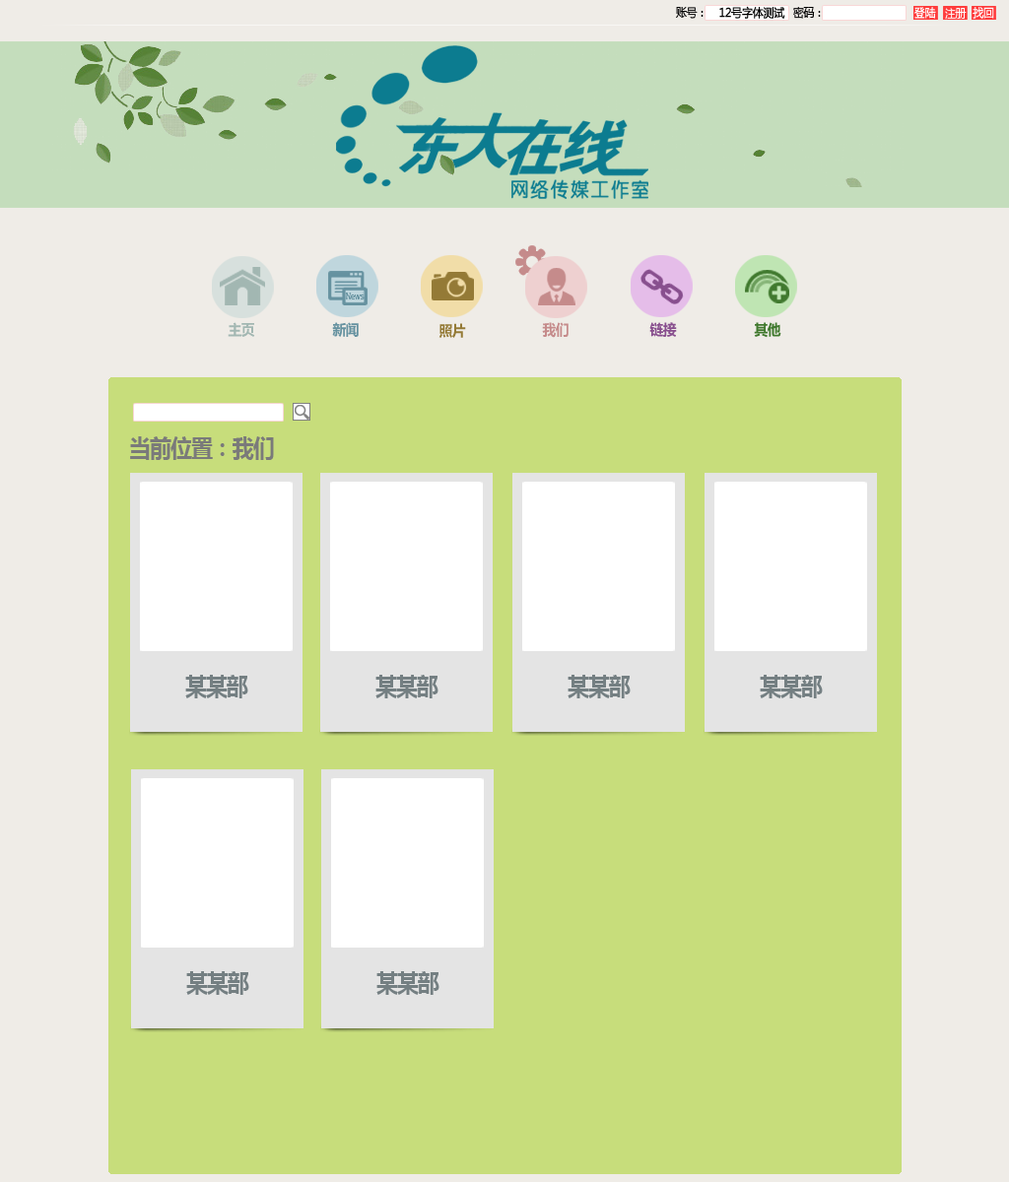
<style>
.page{position:relative;width:1009px;height:1182px;background:#efece7}
.page>*{position:absolute;margin:0}
.t1{font:11.8px "MicrosoftYaHei";letter-spacing:-0.04em;color:#000000;font-weight:bold;scale:0.91 1}
.t2{font:11.8px "MicrosoftYaHei";letter-spacing:-0.04em;color:#000000;scale:0.91 1}
.t3{font:14.8px "MicrosoftYaHei-Bold";letter-spacing:-0.04em;color:#a2b7b2;scale:0.91 1}
.t4{font:14.8px "MicrosoftYaHei-Bold";letter-spacing:-0.04em;color:#6692a0;scale:0.91 1}
.t5{font:14.8px "MicrosoftYaHei-Bold";letter-spacing:-0.04em;color:#947a36;scale:0.91 1}
.t6{font:14.8px "MicrosoftYaHei-Bold";letter-spacing:-0.04em;color:#c58b8b;scale:0.91 1}
.t7{font:14.8px "MicrosoftYaHei-Bold";letter-spacing:-0.04em;color:#884f8e;scale:0.91 1}
.t8{font:14.8px "MicrosoftYaHei-Bold";letter-spacing:-0.04em;color:#40792e;scale:0.91 1}
.t9{font:23.6px "MicrosoftYaHei-Bold";letter-spacing:-0.04em;scale:0.91 1}
.t10{font:23.6px "MicrosoftYaHei-Bold";letter-spacing:-0.04em;color:#7a7a7a;scale:0.91 1}
.t11{font:23.6px "MicrosoftYaHei-Bold";letter-spacing:-0.04em;color:#747f82;scale:0.91 1}
</style>
<div class="page">
<p class="t1" style="left:719px;top:6px;width:66px;height:13px">12号字体测试</p>
<p class="t2" style="left:676px;top:7px;width:27px;height:12px">账号：</p>
<p class="t2" style="left:793px;top:7px;width:28px;height:12px">密码：</p>
<p class="t3" style="left:228px;top:322px;width:27px;height:15px">主页</p>
<p class="t4" style="left:332px;top:322px;width:27px;height:15px">新闻</p>
<p class="t5" style="left:438px;top:323px;width:28px;height:15px">照片</p>
<p class="t6" style="left:542px;top:322px;width:26px;height:16px">我们</p>
<p class="t7" style="left:649px;top:322px;width:28px;height:15px">链接</p>
<p class="t8" style="left:754px;top:322px;width:27px;height:16px">其他</p>
<p class="t9" style="left:130px;top:436px;width:298px;height:24px">当前位置：我们&gt;某某部&gt;成员名</p>
<p class="t10" style="left:130px;top:436px;width:223px;height:24px">当前位置：我们&gt;某某部</p>
<p class="t10" style="left:130px;top:436px;width:144px;height:24px">当前位置：我们</p>
<p class="t11" style="left:185px;top:675px;width:63px;height:23px">某某部</p>
<p class="t11" style="left:375px;top:675px;width:63px;height:23px">某某部</p>
<p class="t11" style="left:567px;top:675px;width:63px;height:23px">某某部</p>
<p class="t11" style="left:760px;top:675px;width:63px;height:23px">某某部</p>
<p class="t11" style="left:186px;top:971px;width:63px;height:24px">某某部</p>
<p class="t11" style="left:376px;top:971px;width:63px;height:24px">某某部</p>
</div>
